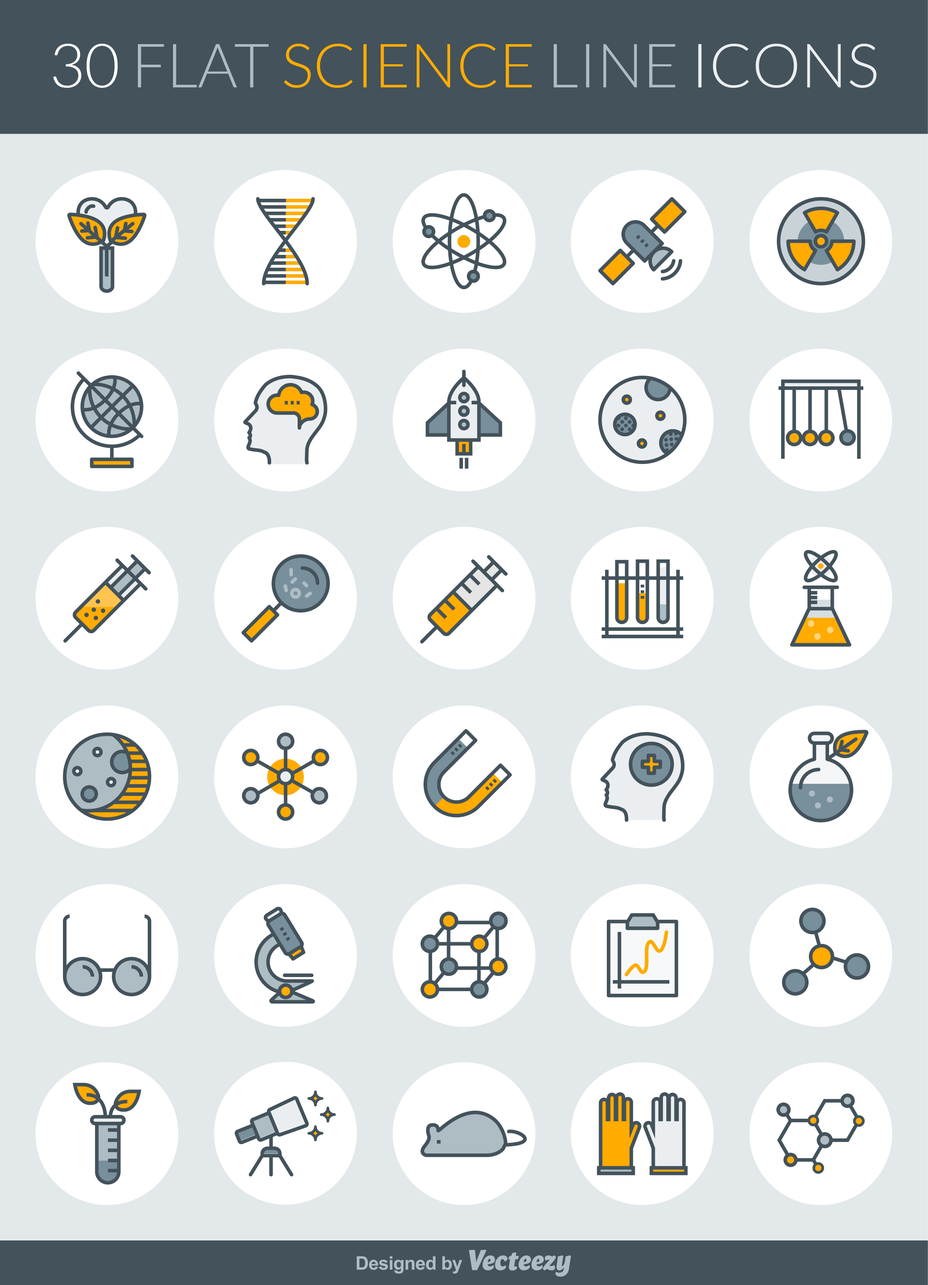
<style>
.page{position:relative;width:928px;height:1285px;background:#e3e8ea}
.page>*{position:absolute;margin:0}
.t1{font:61.1px "Lato-Light";color:#ffab00}
.t2{font:61.1px "Lato-Light";color:#ffffff}
.t3{font:61.1px "Lato-Light";color:#aebcc4}
.t4{font:61.1px "Lato-Light";color:#ebeef0}
</style>
<div class="page">
<p class="t1" style="left:53px;top:44px;width:824px;height:44px"><span class="t2">30 </span><span class="t3">FLAT </span>SCIENCE <span class="t3">LINE </span><span class="t4">ICONS</span></p>
</div>
